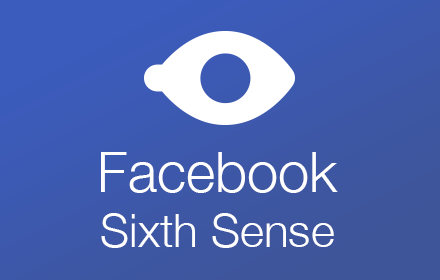
<style>
.page{position:relative;width:440px;height:280px}
.page>*{position:absolute;margin:0}
.t1{font:46px "HelveticaNeue-Light";color:#ffffff}
.t2{font:56px "HelveticaNeue-Light";color:#ffffff}
</style>
<div class="page">
<p class="t1" style="left:101px;top:152px;width:237px;height:96px;text-align:center"><span class="t2">Facebook<br></span>Sixth Sense</p>
</div>
